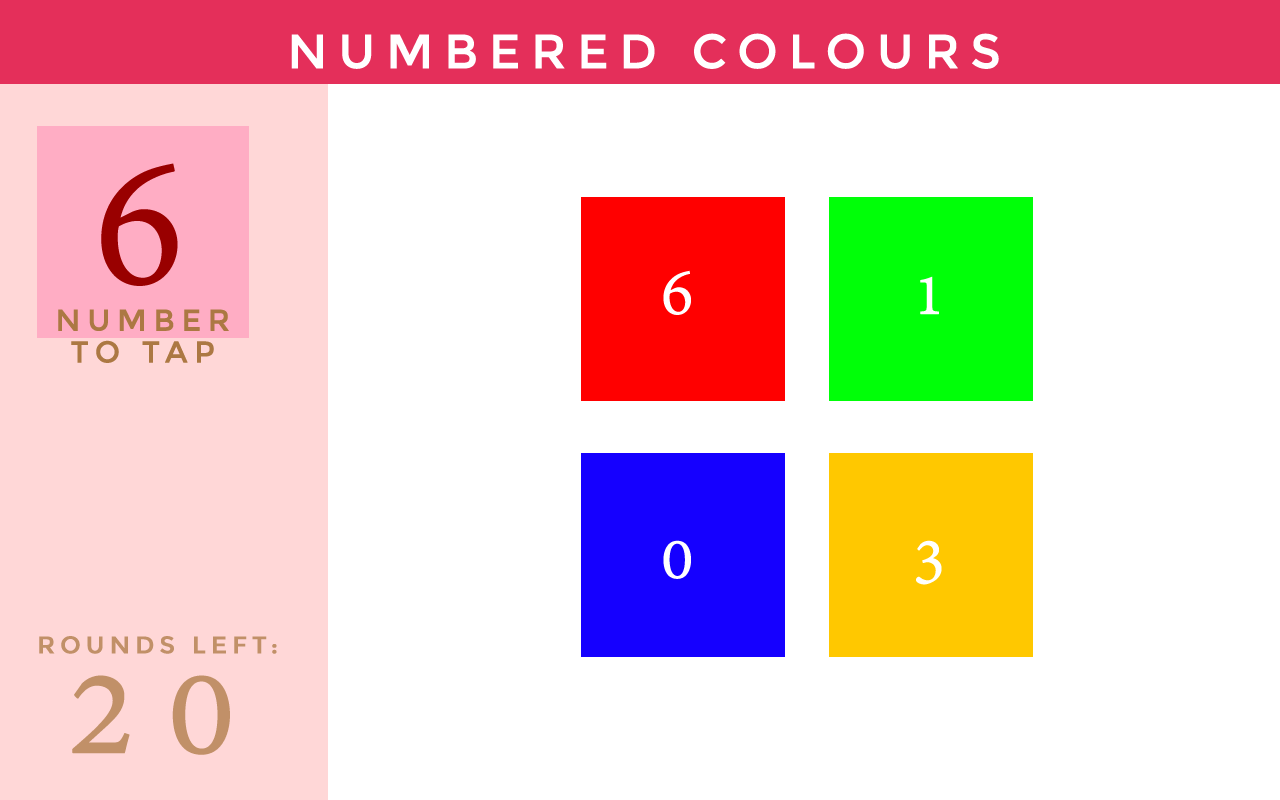
<style>
.page{position:relative;width:1280px;height:800px;background:#ffffff}
.page>*{position:absolute;margin:0}
.t1{font:48px "Montserrat-Regular";letter-spacing:0.2em;color:#ffffff;text-transform:uppercase;font-weight:bold}
.t2{font:200px "AdobeDevanagari-Regular";letter-spacing:0.2em;color:#990000;text-transform:uppercase;font-weight:bold}
.t3{font:72px "AdobeDevanagari-Regular";letter-spacing:0.2em;color:#ffffff;text-transform:uppercase;font-weight:bold}
.t4{font:30px/31.9px "Montserrat-Regular";letter-spacing:0.2em;color:#ac7843;text-transform:uppercase;font-weight:bold}
.t5{font:24px "Montserrat-Regular";letter-spacing:0.2em;color:#c19068;text-transform:uppercase;font-weight:bold}
.t6{font:150px "AdobeDevanagari-Regular";letter-spacing:0.2em;color:#c19068;text-transform:uppercase;font-weight:bold}
</style>
<div class="page">
<p class="t1" style="left:291px;top:33px;width:708px;height:36px">Numbered Colours</p>
<p class="t2" style="left:101px;top:163px;width:77px;height:123px">6</p>
<p class="t3" style="left:663px;top:270px;width:28px;height:45px">6</p>
<p class="t3" style="left:920px;top:276px;width:19px;height:39px">1</p>
<p class="t4" style="left:58px;top:309px;width:171px;height:54px;text-align:center">Number <br>to tap</p>
<p class="t3" style="left:663px;top:540px;width:28px;height:39px">0</p>
<p class="t3" style="left:916px;top:540px;width:26px;height:45px">3</p>
<p class="t5" style="left:39px;top:636px;width:238px;height:18px">Rounds left:</p>
<p class="t6" style="left:72px;top:675px;width:158px;height:80px">20</p>
</div>
